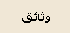
<style>
.page{position:relative;width:70px;height:33px;background:#f0e7d6}
.page>*{position:absolute;margin:0}
.t1{font:11px "Tahoma-Bold";color:#000000}
</style>
<div class="page">
<p class="t1" style="left:22px;top:12px;width:28px;height:11px">وثائق</p>
</div>
